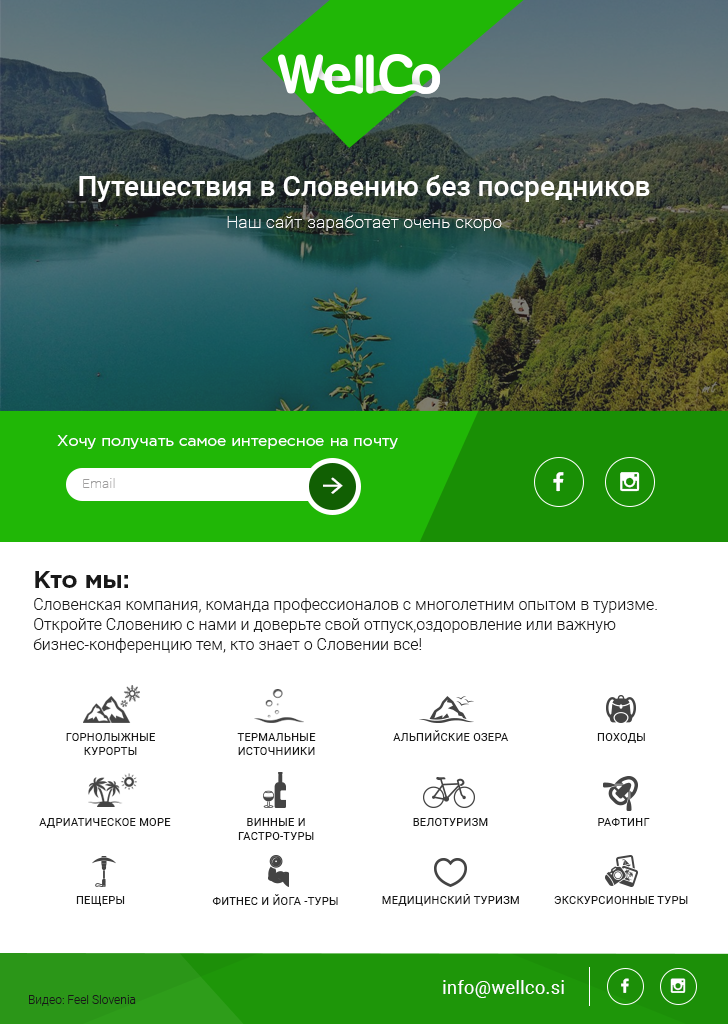
<style>
.page{position:relative;width:728px;height:1024px;background:#ffffff}
.page>*{position:absolute;margin:0}
.t1{font:28px "Roboto-Medium";color:#ffffff}
.t2{font:17px "Roboto-Thin";letter-spacing:0.025em;color:#ffffff}
.t3{font:15.6px "GothamPro";color:#ffffff}
.t4{font:13.2px "Roboto-Thin";letter-spacing:0.025em;color:#9e9d9d}
.t5{font:24px "GothamPro-Bold";color:#191919}
.t6{font:16px/20px "Roboto-Light";color:#191919}
.t7{font:11px/14.2px "Roboto-Regular";letter-spacing:0.025em;color:#181818;text-transform:uppercase}
.t8{font:11px "Roboto-Regular";letter-spacing:0.025em;color:#181818;text-transform:uppercase}
.t9{font:18px "Roboto-Regular";letter-spacing:0.025em;color:#ffffff}
.t10{font:12px "Roboto-Light";color:#181818}
</style>
<div class="page">
<p class="t1" style="left:79px;top:175px;width:571px;height:27px">Путешествия в Словению без посредников</p>
<p class="t2" style="left:227px;top:215px;width:275px;height:16px">Наш сайт заработает очень скоро</p>
<p class="t3" style="left:57px;top:435px;width:341px;height:14px">Хочу получать самое интересное на почту</p>
<p class="t4" style="left:83px;top:478px;width:32px;height:10px">Email</p>
<p class="t5" style="left:35px;top:571px;width:93px;height:17px">Кто мы:</p>
<p class="t6" style="left:33px;top:598px;width:624px;height:55px">Словенская компания, команда профессионалов с многолетним опытом в туризме. Откройте Словению с нами и доверьте свой отпуск,оздоровление или важную бизнес-конференцию тем, кто знает о Словении все!</p>
<p class="t7" style="left:66px;top:733px;width:89px;height:22px;text-align:center">Горнолыжные <br>курорты</p>
<p class="t7" style="left:237px;top:733px;width:79px;height:22px;text-align:center">Термальные <br>источниики</p>
<p class="t8" style="left:393px;top:730px;width:116px;height:11px">Альпийские озера</p>
<p class="t8" style="left:597px;top:733px;width:48px;height:10px">походы</p>
<p class="t8" style="left:39px;top:818px;width:132px;height:10px">Адриатическое море</p>
<p class="t7" style="left:238px;top:818px;width:76px;height:22px;text-align:center">Винные и <br>гастро-туры</p>
<p class="t8" style="left:413px;top:818px;width:75px;height:8px">Велотуризм</p>
<p class="t8" style="left:598px;top:818px;width:52px;height:8px">Рафтинг</p>
<p class="t8" style="left:212px;top:894px;width:126px;height:11px">Фитнес и йога -туры</p>
<p class="t8" style="left:382px;top:894px;width:137px;height:12px">медицинский туризм</p>
<p class="t8" style="left:76px;top:896px;width:49px;height:10px">Пещеры</p>
<p class="t8" style="left:554px;top:896px;width:134px;height:8px">Экскурсионные туры</p>
<p class="t9" style="left:443px;top:980px;width:121px;height:18px">info@wellco.si</p>
<p class="t10" style="left:29px;top:995px;width:107px;height:11px">Видео: Feel Slovenia</p>
</div>
